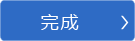
<style>
.page{position:relative;width:135px;height:41px;background:#2e6bc5}
.page>*{position:absolute;margin:0}
.t1{font:18px "MicrosoftYaHei";letter-spacing:0.1em;color:#ffffff}
</style>
<div class="page">
<p class="t1" style="left:41px;top:14px;width:38px;height:16px">完成</p>
</div>
